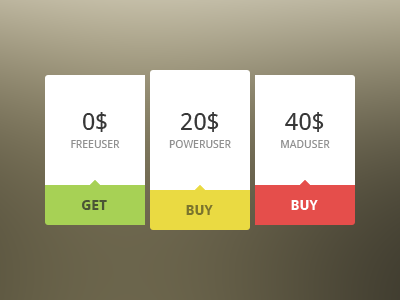
<style>
.page{position:relative;width:400px;height:300px;background:#ffffff}
.page>*{position:absolute;margin:0}
.t1{font:11px/18px "DroidSans";color:#909090}
.t2{font:24px/18px "DroidSans";color:#383838}
.t3{font:14px "DroidSans-Bold";color:#4a5535}
.t4{font:14px "DroidSans-Bold";color:#7b742d}
.t5{font:14px "DroidSans-Bold";color:#ffffff}
</style>
<div class="page">
<p class="t1" style="left:71px;top:112px;width:49px;height:36px;text-align:center"><span class="t2">0$<br></span>FREEUSER</p>
<p class="t1" style="left:169px;top:112px;width:62px;height:36px;text-align:center"><span class="t2">20$<br></span>POWERUSER</p>
<p class="t1" style="left:281px;top:112px;width:49px;height:36px;text-align:center"><span class="t2">40$<br></span>MADUSER</p>
<p class="t3" style="left:82px;top:200px;width:25px;height:10px">GET</p>
<p class="t4" style="left:186px;top:205px;width:27px;height:10px">BUY</p>
<p class="t5" style="left:291px;top:200px;width:27px;height:10px">BUY</p>
</div>
